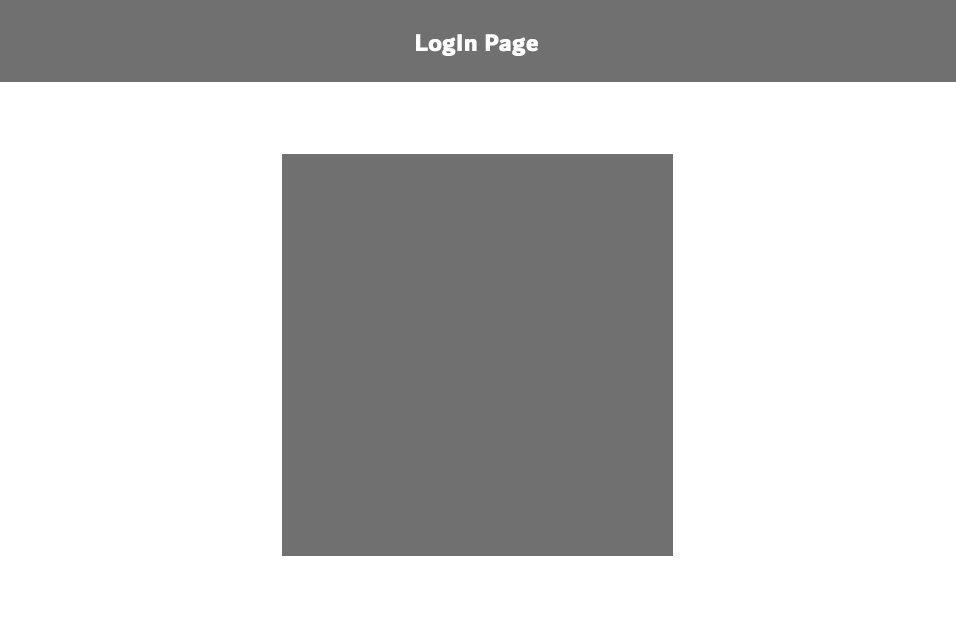
<style>
.page{position:relative;width:956px;height:637px;background:#ffffff}
.page>*{position:absolute;margin:0}
.t1{font:25px "DubaiW23-Bold";color:#ffffff;font-weight:bold}
</style>
<div class="page">
<p class="t1" style="left:416px;top:34px;width:122px;height:22px">LogIn Page</p>
</div>
